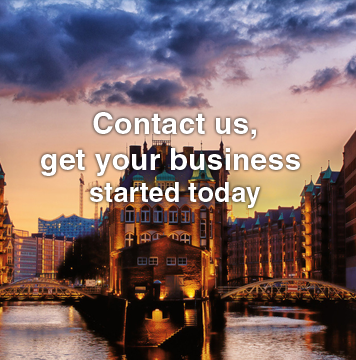
<style>
.page{position:relative;width:356px;height:360px}
.page>*{position:absolute;margin:0}
.t1{font:30px "HelveticaLTStd-Bold";letter-spacing:0.009em;color:#ffffff}
.t2{font:27px "HelveticaLTStd-Bold";letter-spacing:0.009em;color:#ffffff}
</style>
<div class="page">
<p class="t1" style="left:41px;top:112px;width:259px;height:96px;text-align:center">Contact us,<br>get your business <br><span class="t2">started today</span></p>
</div>
